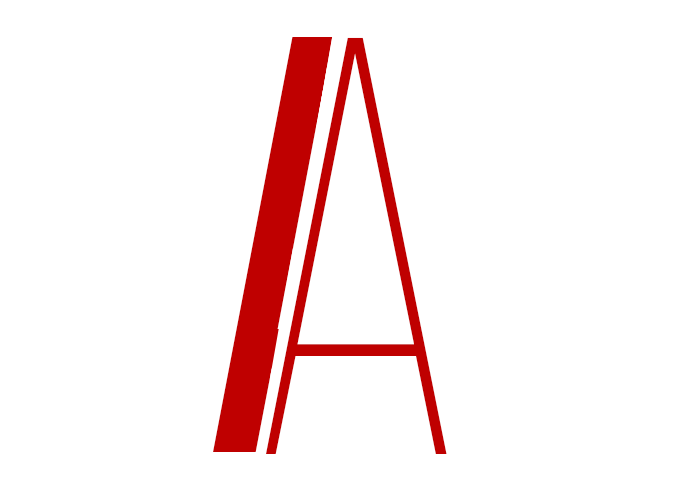
<style>
.page{position:relative;width:700px;height:500px;background:#ffffff}
.page>*{position:absolute;margin:0}
.t1{font:592.3px "BebasNeueRegular"}
.t2{font:592.3px "BebasNeueLight";color:#bf0000;scale:0.82 1}
</style>
<div class="page">
<p class="t1" style="left:213px;top:37px;width:226px;height:415px">A</p>
<p class="t2" style="left:266px;top:37px;width:181px;height:417px">A</p>
</div>
